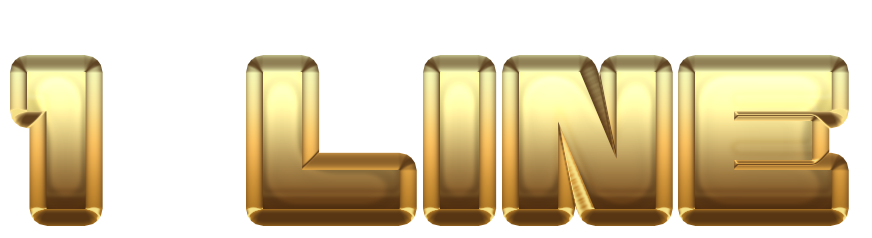
<style>
.page{position:relative;width:872px;height:238px;background:#ffffff}
.page>*{position:absolute;margin:0}
.t1{font:200px "Diagon";letter-spacing:0.15em}
</style>
<div class="page">
<p class="t1" style="left:27px;top:72px;width:805px;height:137px">1  LINE</p>
</div>
